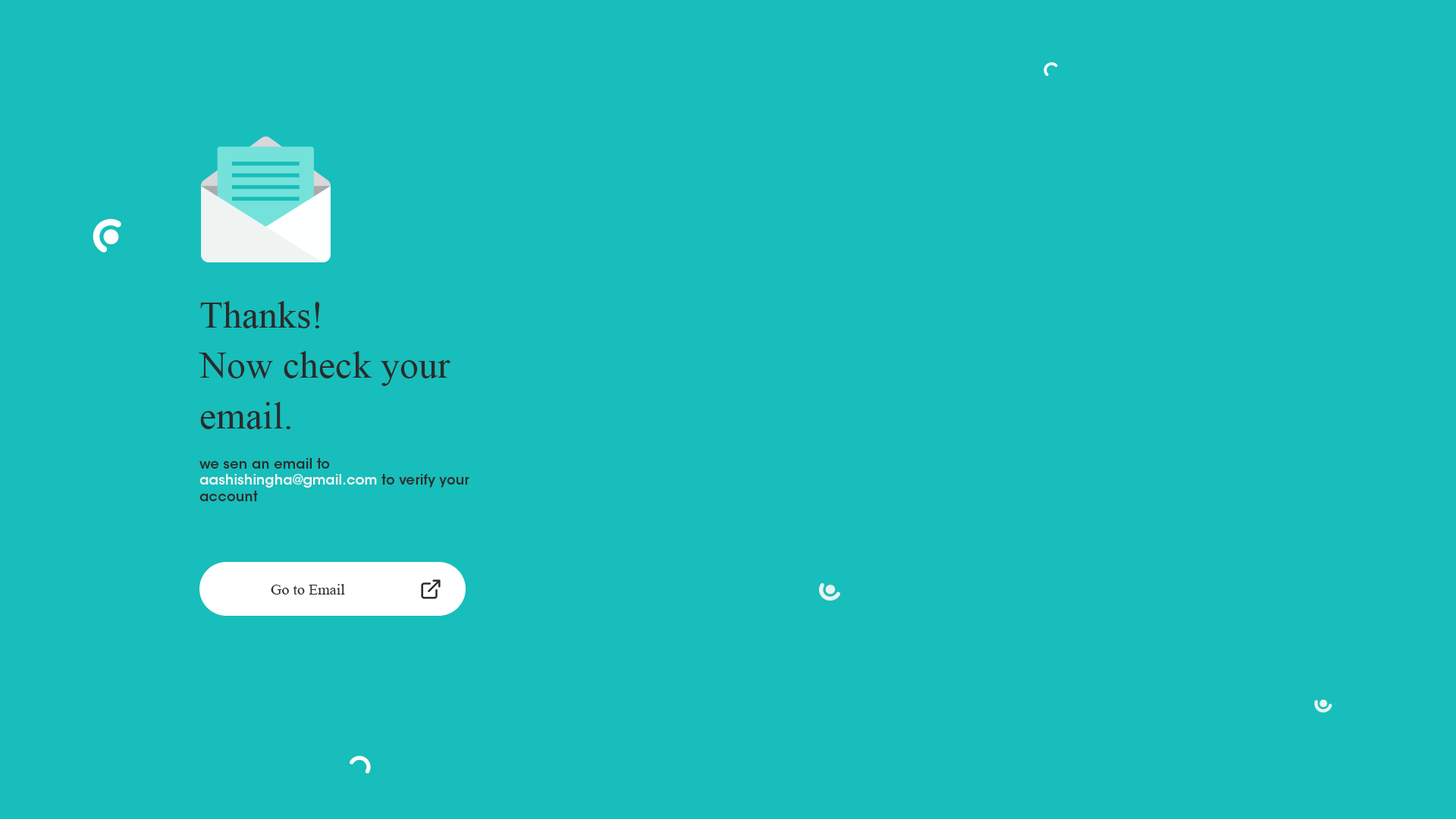
<style>
.page{position:relative;width:1456px;height:819px;background:#17bebb}
.page>*{position:absolute;margin:0}
.t1{font:38px/50.6px "TimesNewRomanPSMT";color:#2b2b2b}
.t2{font:13.7px "ITCAvantGardeStd-Demi";color:#eff4f3}
.t3{font:13.7px "ITCAvantGardeStd-Demi";color:#2b2b2b}
.t4{font:15.2px "TimesNewRomanPSMT";color:#2b2b2b}
</style>
<div class="page">
<p class="t1" style="left:199px;top:301px;width:251px;height:128px">Thanks!<br>Now check your<br>email.</p>
<p class="t2" style="left:199px;top:458px;width:270px;height:43px"><span class="t3">we sen an email to <br></span>aashishingha@gmail.com <span class="t3">to verify your<br>account</span></p>
<p class="t4" style="left:271px;top:584px;width:74px;height:11px">Go to Email</p>
</div>
